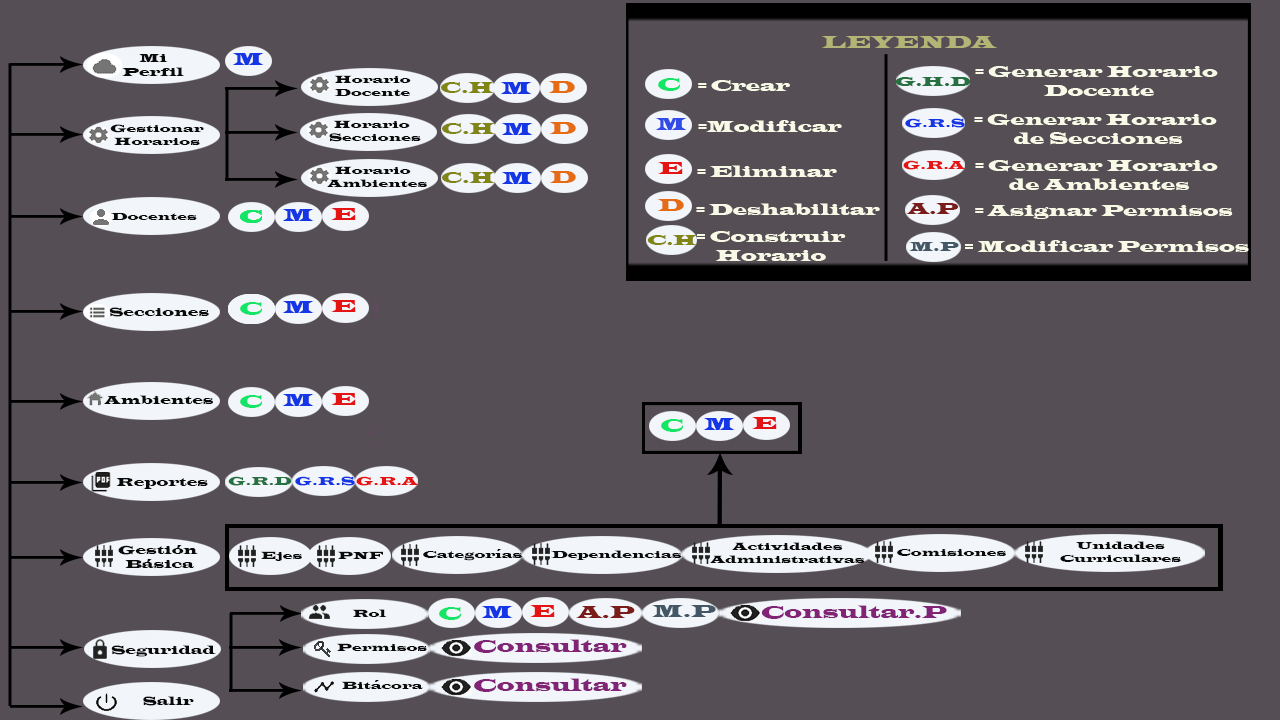
<style>
.page{position:relative;width:1280px;height:720px;background:#554f55}
.page>*{position:absolute;margin:0}
.t1{font:18px "LatinWide";color:#b3b577}
.t2{font:12px "LatinWide";color:#0b0a0b}
.t3{font:18px "LatinWide";color:#1436e5}
.t4{font:11px "LatinWide";color:#0b0a0b}
.t5{font:18px "LatinWide";color:#14e567}
.t6{font:14px "LatinWide";color:#277140}
.t7{font:16px "LatinWide";color:#f8f9e7}
.t8{font:16px "LatinWide";color:#818517}
.t9{font:18px "LatinWide";color:#e56c14}
.t10{font:18px "LatinWide";color:#324ae6}
.t11{font:12px "LatinWide";color:#1436e5}
.t12{font:12px "LatinWide";color:#e51414}
.t13{font:18px "LatinWide";color:#e51414}
.t14{font:16px "LatinWide";color:#791c1a}
.t15{font:15px "LatinWide";color:#818517}
.t16{font:14px "LatinWide";color:#435766}
.t17{font:12px "LatinWide";color:#277140}
.t18{font:18px "LatinWide";color:#791c1a}
.t19{font:18px "LatinWide";color:#435766}
.t20{font:18px "LatinWide";color:#822476}
</style>
<div class="page">
<p class="t1" style="left:822px;top:36px;width:175px;height:12px">LEYENDA</p>
<p class="t2" style="left:122px;top:54px;width:62px;height:22px;text-align:center">Mi<br>Perfil</p>
<p class="t3" style="left:232px;top:53px;width:32px;height:12px">M</p>
<p class="t4" style="left:334px;top:75px;width:77px;height:21px;text-align:center">Horario<br>Docente</p>
<p class="t5" style="left:658px;top:78px;width:22px;height:13px">C</p>
<p class="t6" style="left:895px;top:77px;width:76px;height:10px">G.H.D</p>
<p class="t7" style="left:975px;top:66px;width:243px;height:30px;text-align:center">= Generar Horario <br>Docente</p>
<p class="t8" style="left:441px;top:82px;width:53px;height:11px">C.H</p>
<p class="t3" style="left:500px;top:82px;width:32px;height:12px">M</p>
<p class="t9" style="left:548px;top:81px;width:27px;height:12px">D</p>
<p class="t7" style="left:698px;top:80px;width:92px;height:11px">= Crear</p>
<p class="t4" style="left:110px;top:124px;width:94px;height:21px;text-align:center">Gestionar<br>Horarios</p>
<p class="t4" style="left:329px;top:120px;width:92px;height:22px;text-align:center">Horario<br>  Secciones</p>
<p class="t8" style="left:442px;top:123px;width:53px;height:11px">C.H</p>
<p class="t3" style="left:501px;top:123px;width:32px;height:12px">M</p>
<p class="t9" style="left:549px;top:122px;width:27px;height:12px">D</p>
<p class="t10" style="left:655px;top:118px;width:32px;height:12px">M</p>
<p class="t7" style="left:698px;top:120px;width:144px;height:12px">=Modificar</p>
<p class="t11" style="left:905px;top:118px;width:60px;height:10px">G.R.S</p>
<p class="t7" style="left:974px;top:114px;width:243px;height:31px;text-align:center">= Generar Horario <br>de Secciones</p>
<p class="t12" style="left:903px;top:160px;width:63px;height:10px">G.R.A</p>
<p class="t7" style="left:975px;top:160px;width:243px;height:31px;text-align:center">= Generar Horario <br>de Ambientes</p>
<p class="t4" style="left:327px;top:166px;width:100px;height:21px;text-align:center">Horario<br>   Ambientes</p>
<p class="t8" style="left:442px;top:172px;width:53px;height:11px">C.H</p>
<p class="t3" style="left:501px;top:172px;width:32px;height:12px">M</p>
<p class="t9" style="left:549px;top:171px;width:27px;height:12px">D</p>
<p class="t13" style="left:658px;top:162px;width:25px;height:12px">E</p>
<p class="t7" style="left:697px;top:165px;width:140px;height:12px">= Eliminar</p>
<p class="t3" style="left:282px;top:209px;width:32px;height:12px">M</p>
<p class="t13" style="left:331px;top:208px;width:25px;height:12px">E</p>
<p class="t9" style="left:657px;top:199px;width:27px;height:12px">D</p>
<p class="t7" style="left:696px;top:203px;width:184px;height:13px">= Deshabilitar</p>
<p class="t14" style="left:906px;top:203px;width:53px;height:11px">A.P</p>
<p class="t7" style="left:975px;top:205px;width:258px;height:14px">= Asignar Permisos</p>
<p class="t4" style="left:111px;top:213px;width:86px;height:7px">Docentes</p>
<p class="t5" style="left:240px;top:210px;width:22px;height:13px">C</p>
<p class="t5" style="left:240px;top:210px;width:22px;height:13px">C</p>
<p class="t5" style="left:240px;top:210px;width:22px;height:13px">C</p>
<p class="t5" style="left:240px;top:210px;width:22px;height:13px">C</p>
<p class="t7" style="left:697px;top:231px;width:149px;height:30px;text-align:center">= Construir<br>Horario</p>
<p class="t15" style="left:647px;top:235px;width:50px;height:10px">C.H</p>
<p class="t16" style="left:909px;top:242px;width:50px;height:9px">M.P</p>
<p class="t7" style="left:965px;top:240px;width:284px;height:13px">= Modificar Permisos</p>
<p class="t5" style="left:240px;top:302px;width:22px;height:13px">C</p>
<p class="t3" style="left:282px;top:301px;width:32px;height:12px">M</p>
<p class="t13" style="left:331px;top:300px;width:25px;height:12px">E</p>
<p class="t2" style="left:109px;top:307px;width:100px;height:10px">Secciones</p>
<p class="t2" style="left:104px;top:395px;width:109px;height:10px">Ambientes</p>
<p class="t5" style="left:240px;top:395px;width:22px;height:13px">C</p>
<p class="t3" style="left:282px;top:394px;width:32px;height:12px">M</p>
<p class="t13" style="left:331px;top:393px;width:25px;height:12px">E</p>
<p class="t5" style="left:661px;top:419px;width:22px;height:13px">C</p>
<p class="t3" style="left:703px;top:418px;width:32px;height:12px">M</p>
<p class="t13" style="left:752px;top:417px;width:25px;height:12px">E</p>
<p class="t2" style="left:116px;top:478px;width:92px;height:11px">Reportes</p>
<p class="t17" style="left:228px;top:476px;width:64px;height:10px">G.R.D</p>
<p class="t11" style="left:295px;top:476px;width:60px;height:10px">G.R.S</p>
<p class="t12" style="left:356px;top:476px;width:63px;height:10px">G.R.A</p>
<p class="t2" style="left:118px;top:545px;width:80px;height:24px;text-align:center">Gestión <br>Básica</p>
<p class="t4" style="left:710px;top:542px;width:155px;height:21px;text-align:center">Actividades<br>Administrativas</p>
<p class="t4" style="left:1060px;top:541px;width:121px;height:21px;text-align:center">Unidades<br>Curriculares</p>
<p class="t4" style="left:261px;top:551px;width:41px;height:10px">Ejes</p>
<p class="t4" style="left:338px;top:551px;width:45px;height:8px">PNF</p>
<p class="t4" style="left:423px;top:549px;width:99px;height:12px">Categorías</p>
<p class="t4" style="left:551px;top:550px;width:131px;height:10px">Dependencias</p>
<p class="t4" style="left:897px;top:549px;width:109px;height:7px">Comisiones</p>
<p class="t3" style="left:481px;top:606px;width:32px;height:12px">M</p>
<p class="t13" style="left:530px;top:605px;width:25px;height:12px">E</p>
<p class="t18" style="left:576px;top:606px;width:59px;height:12px">A.P</p>
<p class="t19" style="left:652px;top:605px;width:64px;height:12px">M.P</p>
<p class="t20" style="left:761px;top:605px;width:186px;height:14px">Consultar.P</p>
<p class="t4" style="left:352px;top:609px;width:35px;height:8px">Rol</p>
<p class="t5" style="left:439px;top:607px;width:22px;height:13px">C</p>
<p class="t20" style="left:474px;top:639px;width:153px;height:14px">Consultar</p>
<p class="t2" style="left:111px;top:645px;width:105px;height:12px">Seguridad</p>
<p class="t4" style="left:337px;top:643px;width:90px;height:8px">Permisos</p>
<p class="t20" style="left:474px;top:678px;width:153px;height:14px">Consultar</p>
<p class="t4" style="left:341px;top:680px;width:82px;height:9px">Bitácora</p>
<p class="t2" style="left:143px;top:696px;width:51px;height:10px">Salir</p>
</div>
